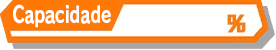
<style>
.page{position:relative;width:276px;height:50px;background:#fffeff}
.page>*{position:absolute;margin:0}
.t1{font:22.7px "RodinPro-B";letter-spacing:-0.014em;color:#ffffff;scale:0.75 1}
</style>
<div class="page">
<p class="t1" style="left:13px;top:4px;width:98px;height:24px">Capacidade</p>
</div>
